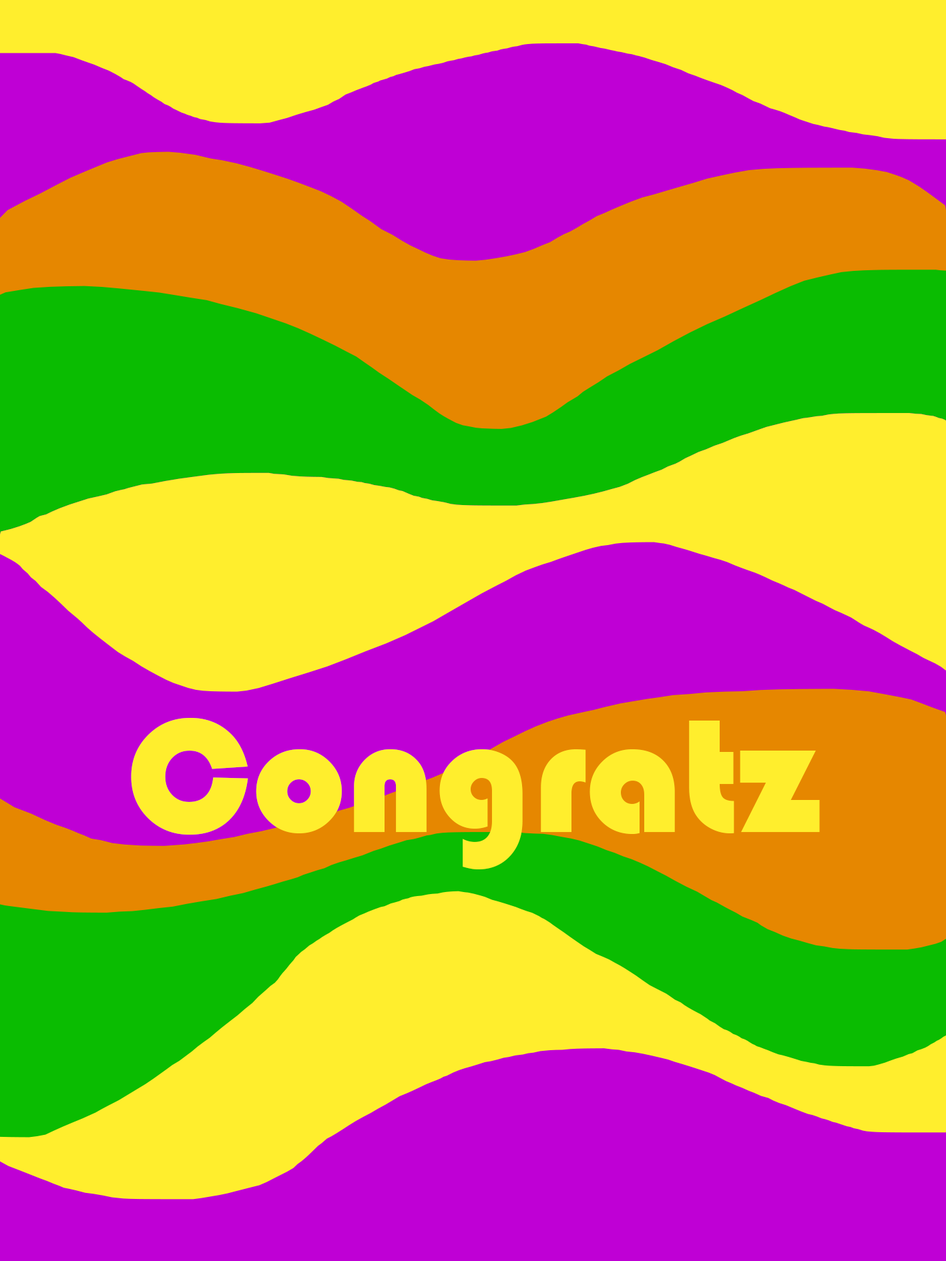
<style>
.page{position:relative;width:946px;height:1261px;background:#ffee2d}
.page>*{position:absolute;margin:0}
.t1{font:166.8px "Bauhaus93";color:#ffee2d}
</style>
<div class="page">
<p class="t1" style="left:131px;top:718px;width:688px;height:151px">Congratz</p>
</div>
